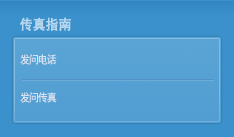
<style>
.page{position:relative;width:234px;height:137px;background:#3a91cb}
.page>*{position:absolute;margin:0}
.t1{font:14px "SimHei";color:#b9d7ef;font-weight:bold;scale:0.9 1}
.t2{font:11px "SimHei";letter-spacing:-0.1em;color:#d9e0ef;scale:0.9 1}
</style>
<div class="page">
<p class="t1" style="left:20px;top:17px;width:51px;height:14px">传真指南</p>
<p class="t2" style="left:20px;top:54px;width:37px;height:11px">发问电话</p>
<p class="t2" style="left:20px;top:92px;width:37px;height:11px">发问传真</p>
</div>
